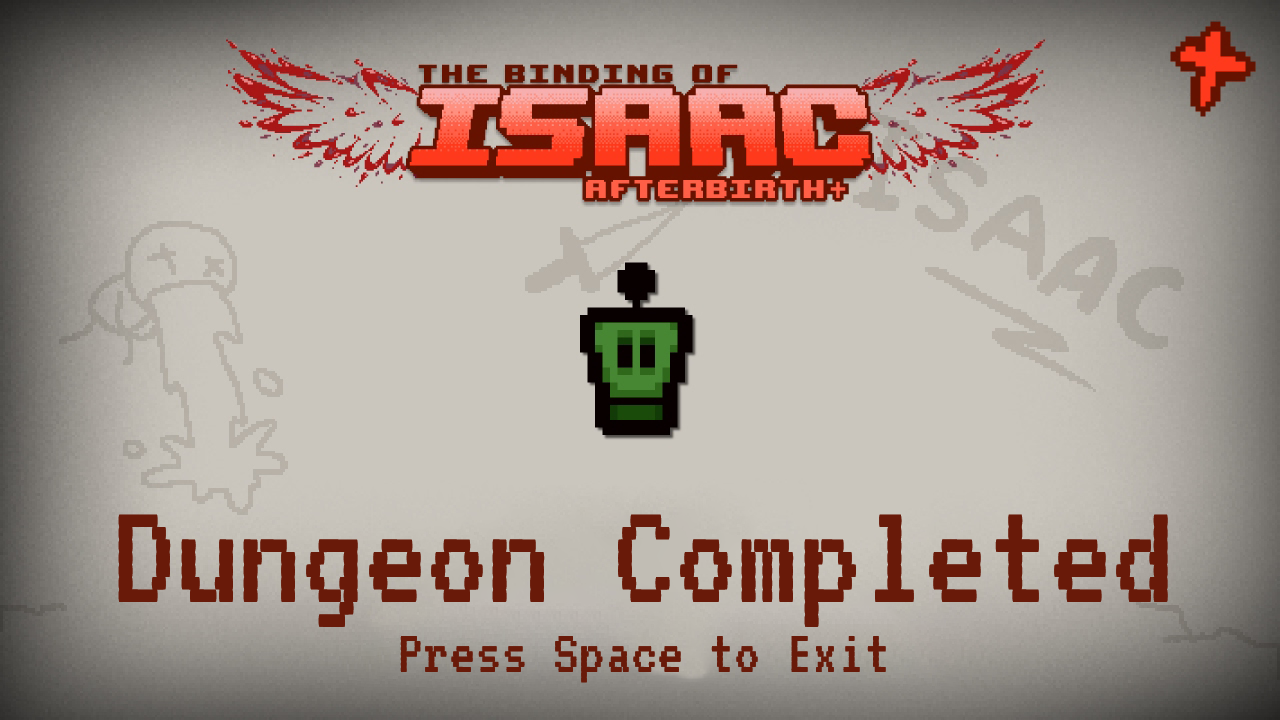
<style>
.page{position:relative;width:1280px;height:720px;background:#cac6bd}
.page>*{position:absolute;margin:0}
.t1{font:150px "VT323-Regular";color:#691a09}
.t2{font:62.4px "VT323-Regular";color:#691a09}
</style>
<div class="page">
<p class="t1" style="left:118px;top:514px;width:1050px;height:113px">Dungeon Completed</p>
<p class="t2" style="left:400px;top:636px;width:486px;height:47px">Press Space to Exit</p>
</div>
